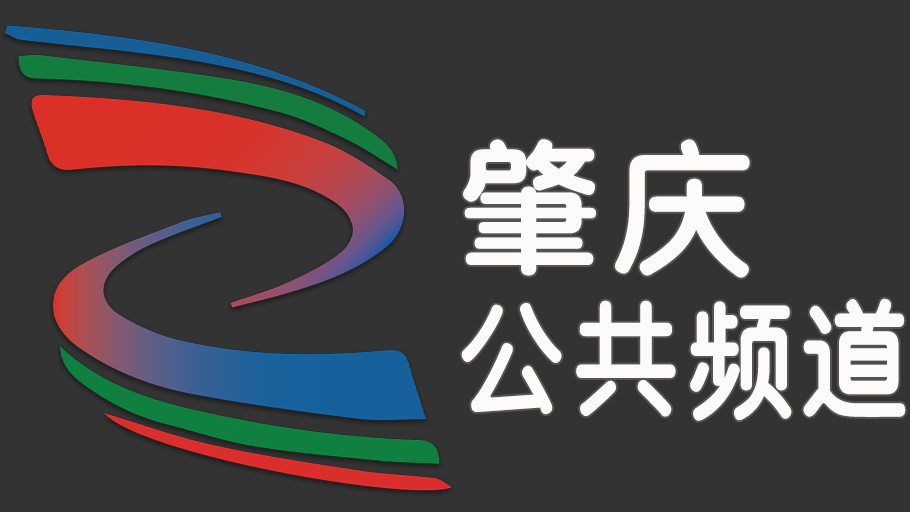
<style>
.page{position:relative;width:910px;height:512px;background:#333333}
.page>*{position:absolute;margin:0}
.t1{font:132px/160px "SJyuantijian-C-Regular";letter-spacing:0.02em;color:#fcfbf9;scale:0.85 1}
.t2{font:150px/160px "SJyuantijian-C-Regular";letter-spacing:0.02em;color:#fcfbf9}
</style>
<div class="page">
<p class="t1" style="left:461px;top:139px;width:445px;height:282px"><span class="t2">肇庆<br></span>公共频道</p>
</div>
